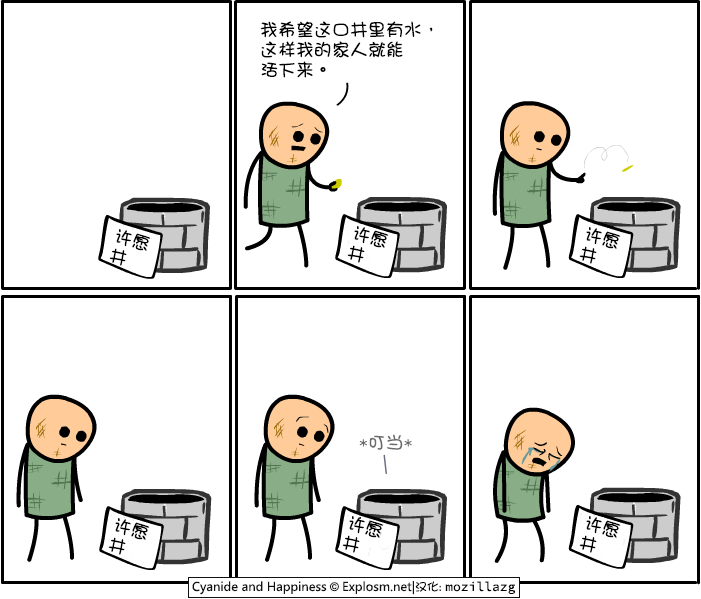
<style>
.page{position:relative;width:701px;height:599px;background:#ffffff}
.page>*{position:absolute;margin:0}
.t1{font:18px/20px "DFGirl";color:#000000}
.t2{font:18px "DFGirl";color:#6b6b6b}
</style>
<div class="page">
<p class="t1" style="left:260px;top:21px;width:173px;height:57px">我希望这口井里有水，<br>这样我的家人就能<br>活下来。</p>
<p class="t1" style="left:109px;top:229px;width:42px;height:37px;rotate:15deg">许愿<br>井</p>
<p class="t1" style="left:347px;top:226px;width:42px;height:37px;rotate:15deg">许愿<br>井</p>
<p class="t1" style="left:579px;top:227px;width:42px;height:37px;rotate:15deg">许愿<br>井</p>
<p class="t2" style="left:359px;top:434px;width:53px;height:16px">*叮当*</p>
<p class="t1" style="left:108px;top:518px;width:42px;height:37px;rotate:15deg">许愿<br>井</p>
<p class="t1" style="left:342px;top:516px;width:42px;height:37px;rotate:15deg">许愿<br>井</p>
<p class="t1" style="left:579px;top:516px;width:42px;height:37px;rotate:15deg">许愿<br>井</p>
</div>
